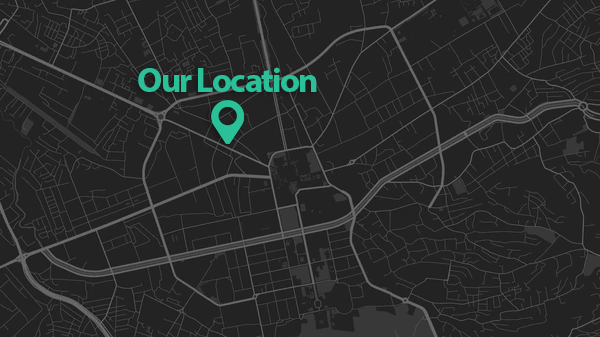
<style>
.page{position:relative;width:600px;height:337px;background:#232323}
.page>*{position:absolute;margin:0}
.t1{font:35px "MyriadPro-Bold";letter-spacing:-0.05em;color:#2ac198}
</style>
<div class="page">
<p class="t1" style="left:138px;top:67px;width:179px;height:25px">Our Location</p>
</div>
